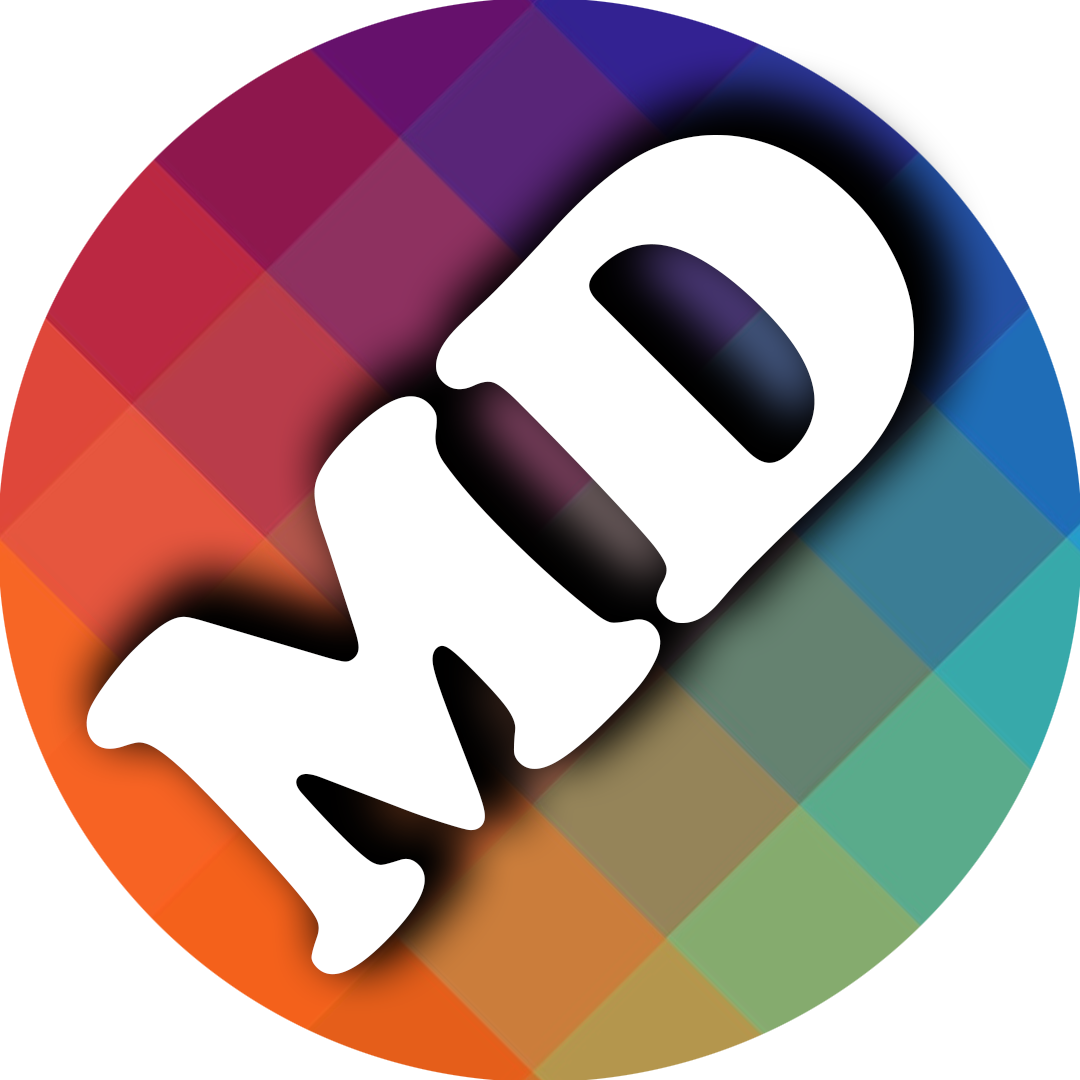
<style>
.page{position:relative;width:1080px;height:1080px;background:#ffffff}
.page>*{position:absolute;margin:0}
.t1{font:559.5px "CooperBlack";color:#ffffff}
</style>
<div class="page">
<p class="t1" style="left:86px;top:135px;width:828px;height:840px;rotate:-45deg">MD</p>
</div>
